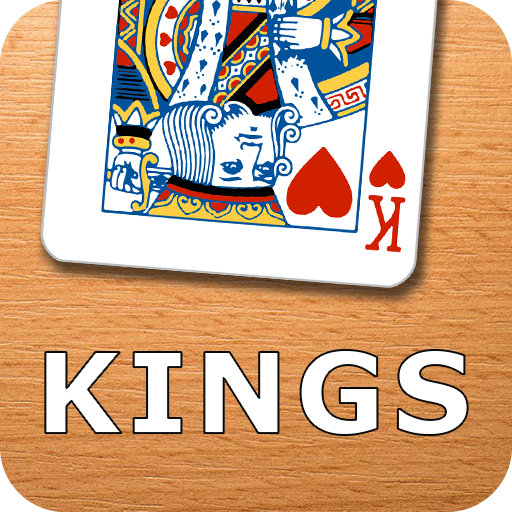
<style>
.page{position:relative;width:512px;height:512px;background:#ffffff}
.page>*{position:absolute;margin:0}
.t1{font:112.4px "Verdana-Bold";letter-spacing:0.05em;color:#ffffff}
</style>
<div class="page">
<p class="t1" style="left:45px;top:350px;width:423px;height:85px">KINGS</p>
</div>
